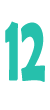
<style>
.page{position:relative;width:50px;height:110px;background:#ffffff}
.page>*{position:absolute;margin:0}
.t1{font:96px "BerlinSansFBDemi-Bold";color:#26c0ac;scale:0.5 1}
</style>
<div class="page">
<p class="t1" style="left:5px;top:21px;width:40px;height:61px">12</p>
</div>
